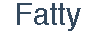
<style>
.page{position:relative;width:97px;height:34px;background:#ffffff}
.page>*{position:absolute;margin:0}
.t1{font:30px "Helvetica";color:#34495e}
</style>
<div class="page">
<p class="t1" style="left:17px;top:3px;width:64px;height:28px">Fatty</p>
</div>
